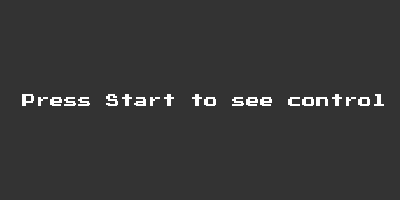
<style>
.page{position:relative;width:400px;height:200px;background:#333333}
.page>*{position:absolute;margin:0}
.t1{font:14px "PressStart2P";color:#ffffff}
</style>
<div class="page">
<p class="t1" style="left:22px;top:94px;width:362px;height:12px">Press Start to see control</p>
</div>
